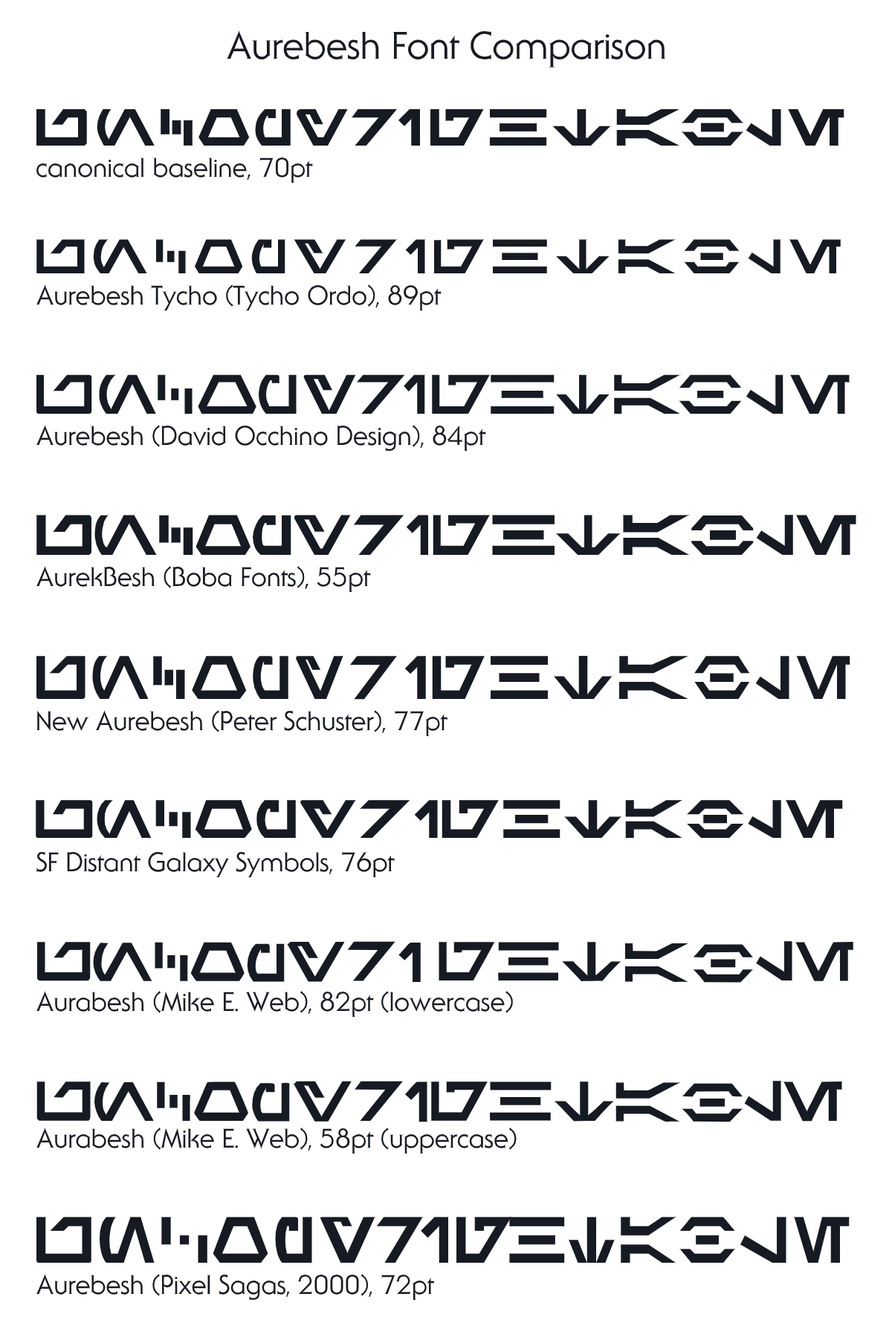
<style>
.page{position:relative;width:892px;height:1337px;background:#ffffff}
.page>*{position:absolute;margin:0}
.t1{font:37.2px "AndroclesOpti-Regular";color:#161a22}
.t2{font:26px "AndroclesOpti-Regular";color:#161a22}
.t3{font:66.1px "AurebeshTycho";color:#161a22}
.t4{font:62.4px "Aurebesh";color:#161a22}
.t5{font:40.9px "Aurek-Besh";color:#161a22}
.t6{font:57.2px "newAurabesh";color:#161a22}
.t7{font:56.5px "SFDistantGalaxySymbols";color:#161a22}
.t8{font:60.9px "Aurabesh";color:#161a22}
.t9{font:43.1px "Aurabesh";color:#161a22}
</style>
<div class="page">
<p class="t1" style="left:227px;top:30px;width:438px;height:38px">Aurebesh Font Comparison</p>
<p class="t2" style="left:36px;top:158px;width:277px;height:26px">canonical baseline, 70pt</p>
<p class="t3" style="left:36px;top:239px;width:804px;height:35px">uncopyrightable</p>
<p class="t2" style="left:36px;top:285px;width:405px;height:26px">Aurebesh Tycho (Tycho Ordo), 89pt</p>
<p class="t4" style="left:36px;top:374px;width:813px;height:41px">uncopyrightable</p>
<p class="t2" style="left:36px;top:425px;width:450px;height:27px">Aurebesh (David Occhino Design), 84pt</p>
<p class="t5" style="left:36px;top:515px;width:820px;height:41px">uncopyrightable</p>
<p class="t2" style="left:36px;top:566px;width:335px;height:27px">AurekBesh (Boba Fonts), 55pt</p>
<p class="t6" style="left:36px;top:656px;width:814px;height:44px">uncopyrightable</p>
<p class="t2" style="left:36px;top:710px;width:411px;height:27px">New Aurebesh (Peter Schuster), 77pt</p>
<p class="t7" style="left:36px;top:800px;width:807px;height:38px">uncopyrightable</p>
<p class="t2" style="left:36px;top:852px;width:359px;height:26px">SF Distant Galaxy Symbols, 76pt</p>
<p class="t8" style="left:36px;top:941px;width:817px;height:42px">uncopyrightable</p>
<p class="t2" style="left:36px;top:991px;width:477px;height:27px">Aurabesh (Mike E. Web), 82pt (lowercase)</p>
<p class="t9" style="left:36px;top:1081px;width:806px;height:42px">UNCOPYRIGHTABLE</p>
<p class="t2" style="left:36px;top:1128px;width:480px;height:27px">Aurabesh (Mike E. Web), 58pt (uppercase)</p>
<p class="t2" style="left:36px;top:1274px;width:399px;height:27px">Aurebesh (Pixel Sagas, 2000), 72pt</p>
</div>
